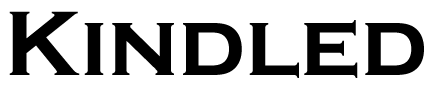
<style>
.page{position:relative;width:436px;height:86px;background:#ffffff}
.page>*{position:absolute;margin:0}
.t1{font:95px "CopperplateGothic-Bold";color:#000000}
</style>
<div class="page">
<p class="t1" style="left:9px;top:11px;width:415px;height:67px">Kindled</p>
</div>
